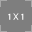
<style>
.page{position:relative;width:32px;height:32px;background:#7e7e7e}
.page>*{position:absolute;margin:0}
.t1{font:9px "AcuminConcept-Regular";color:#ffffff}
</style>
<div class="page">
<p class="t1" style="left:8px;top:13px;width:16px;height:7px">1 X 1</p>
</div>
